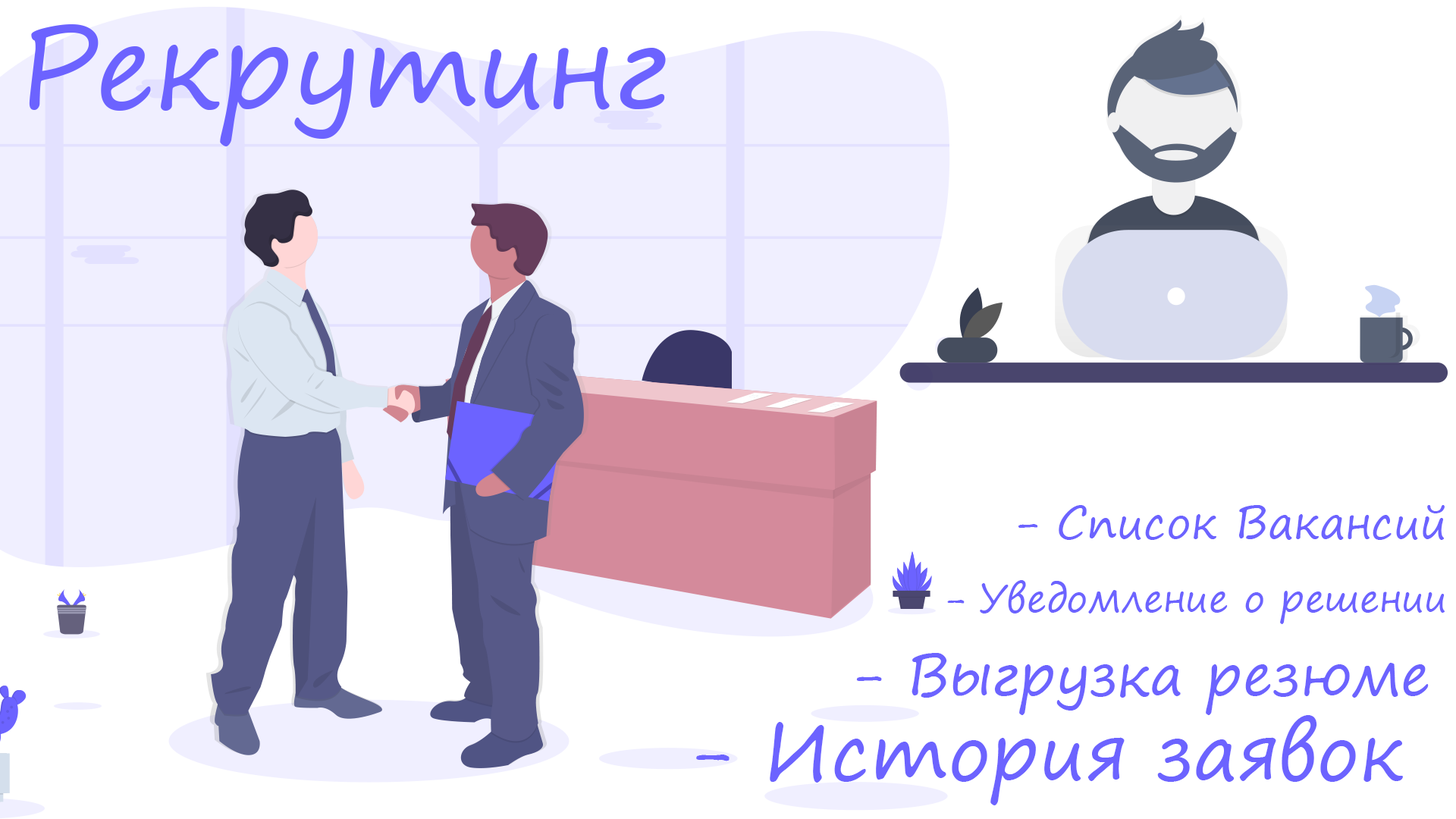
<style>
.page{position:relative;width:1456px;height:819px;background:#ffffff}
.page>*{position:absolute;margin:0}
.t1{font:44.2px "SegoePrint";color:#6c63ff}
.t2{font:37.9px "SegoePrint";color:#6c63ff}
.t3{font:56.9px "SegoePrint";color:#6c63ff}
.t4{font:75.8px "SegoePrint";color:#6c63ff}
</style>
<div class="page">
<p class="t1" style="left:1018px;top:505px;width:427px;height:35px">- Список Вакансий</p>
<p class="t2" style="left:947px;top:580px;width:498px;height:44px">- Уведомление о решении</p>
<p class="t3" style="left:856px;top:653px;width:573px;height:62px">- Выгрузка резюме</p>
<p class="t4" style="left:696px;top:715px;width:707px;height:90px">- История заявок</p>
</div>
